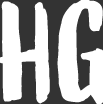
<style>
.page{position:relative;width:103px;height:104px;background:#ffffff}
.page>*{position:absolute;margin:0}
.t1{font:136.5px "Active-Regular";color:#ffffff;font-weight:bold;scale:0.86 1}
</style>
<div class="page">
<p class="t1" style="left:0px;top:0px;width:105px;height:106px">HG</p>
</div>
